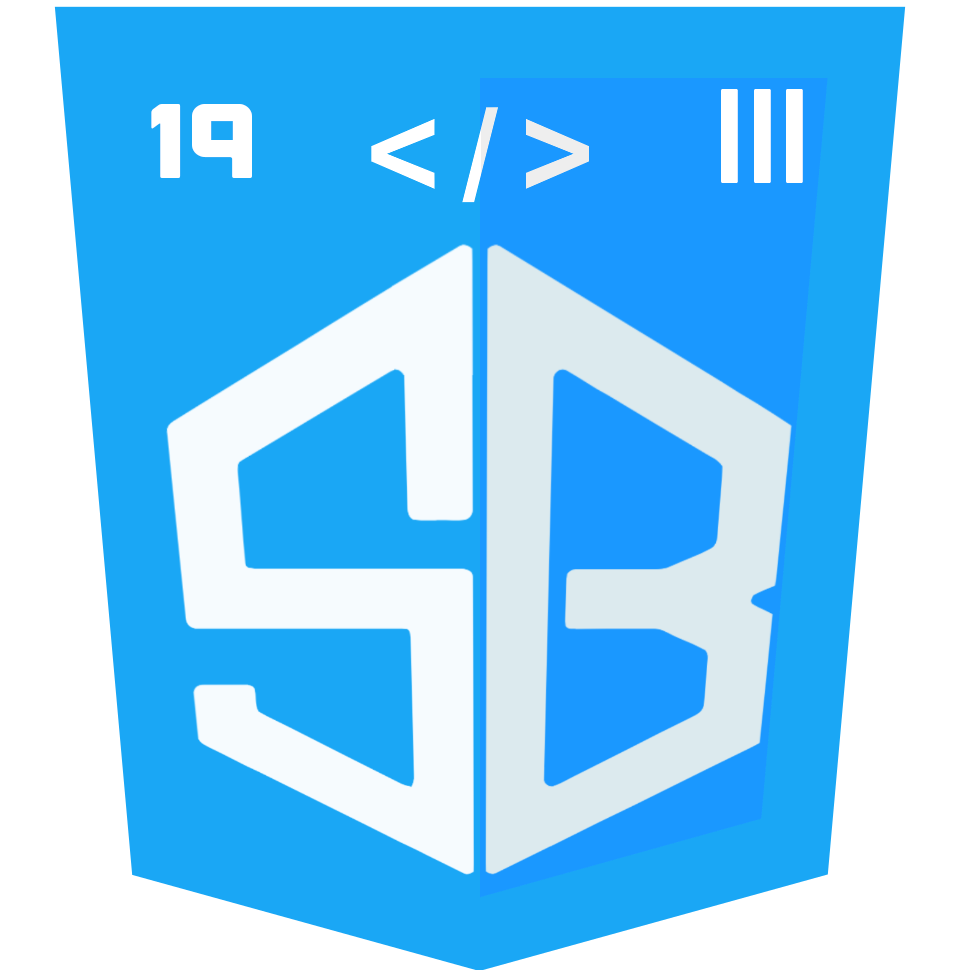
<style>
.page{position:relative;width:970px;height:970px;background:#1aa7f5}
.page>*{position:absolute;margin:0}
.t1{font:100px "Outage-Regular";color:#ffffff}
.t2{font:105.5px "Outage-Regular";color:#ffffff;scale:1.06 1}
</style>
<div class="page">
<p class="t1" style="left:721px;top:89px;width:82px;height:94px">|||</p>
<p class="t2" style="left:151px;top:104px;width:101px;height:74px">19</p>
</div>
